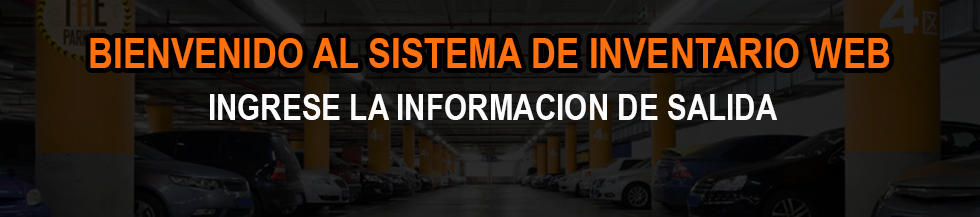
<style>
.page{position:relative;width:980px;height:217px}
.page>*{position:absolute;margin:0}
.t1{font:42.3px "ArialNarrow-Bold";color:#ff710e}
.t2{font:36.2px "ArialNarrow-Bold";color:#fcfbfb}
</style>
<div class="page">
<p class="t1" style="left:90px;top:38px;width:800px;height:30px">BIENVENIDO AL SISTEMA DE INVENTARIO WEB</p>
<p class="t2" style="left:210px;top:94px;width:567px;height:26px">INGRESE LA INFORMACION DE SALIDA</p>
</div>
